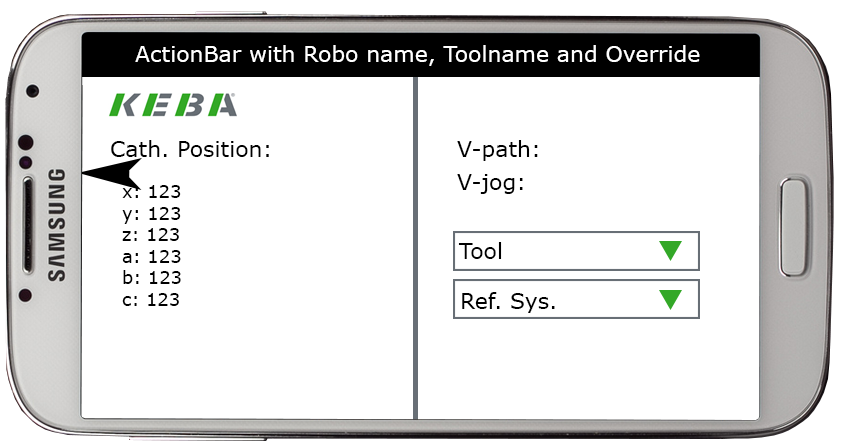
<style>
.page{position:relative;width:841px;height:446px;background:#ffffff}
.page>*{position:absolute;margin:0}
.t1{font:22px "Verdana";color:#ffffff}
.t2{font:22px "Verdana";color:#000000}
.t3{font:18px "Verdana";color:#000000}
</style>
<div class="page">
<p class="t1" style="left:135px;top:45px;width:565px;height:21px">ActionBar with Robo name, Toolname and Override</p>
<p class="t2" style="left:111px;top:140px;width:158px;height:17px">Cath. Position:</p>
<p class="t2" style="left:457px;top:140px;width:81px;height:21px">V-path:</p>
<p class="t2" style="left:457px;top:174px;width:66px;height:20px">V-jog:</p>
<p class="t3" style="left:122px;top:185px;width:59px;height:121px">x: 123<br>y: 123<br>z: 123<br>a: 123<br>b: 123<br>c: 123</p>
<p class="t2" style="left:458px;top:242px;width:44px;height:17px">Tool</p>
<p class="t2" style="left:462px;top:292px;width:93px;height:21px">Ref. Sys.</p>
</div>
